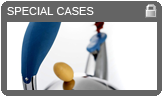
<style>
.page{position:relative;width:163px;height:97px;background:#646464}
.page>*{position:absolute;margin:0}
.t1{font:11px "ArialMT";color:#fefefe}
</style>
<div class="page">
<p class="t1" style="left:7px;top:7px;width:87px;height:8px">SPECIAL CASES</p>
</div>
